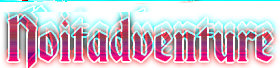
<style>
.page{position:relative;width:280px;height:68px}
.page>*{position:absolute;margin:0}
.t1{font:64px "NoitaBlackletter-Regular"}
</style>
<div class="page">
<p class="t1" style="left:8px;top:7px;width:265px;height:54px">Noitadventure</p>
</div>
